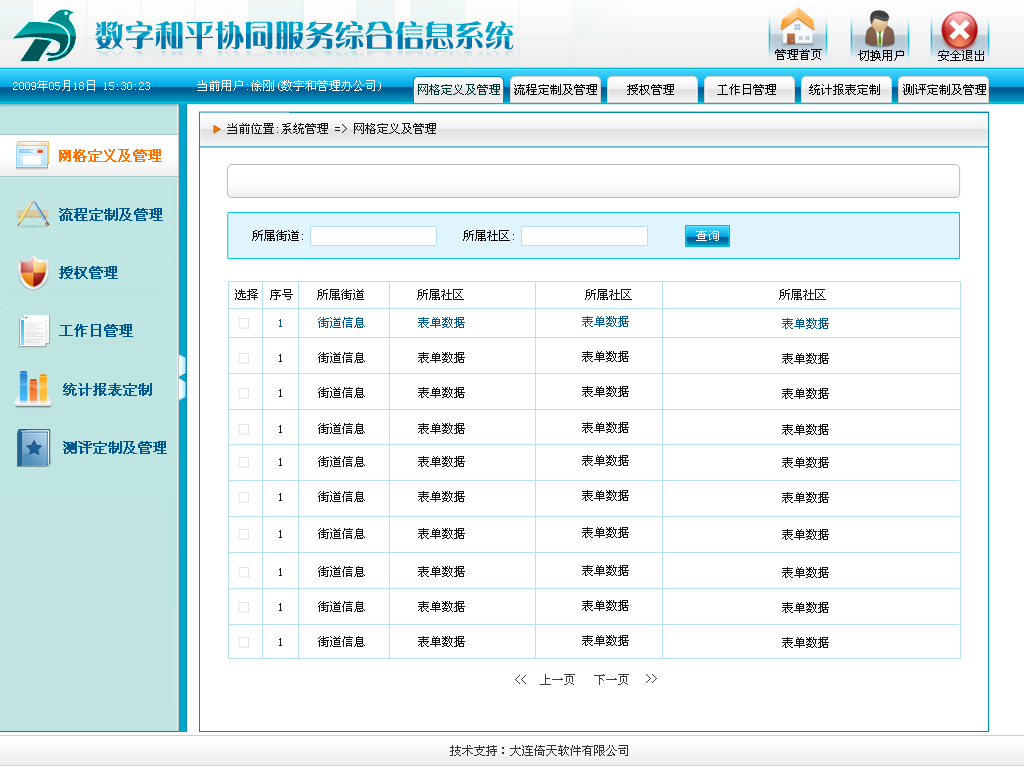
<style>
.page{position:relative;width:1024px;height:768px;background:#ffffff}
.page>*{position:absolute;margin:0}
.t1{font:12px "SimSun";color:#000000}
.t2{font:12px "SimSun";color:#ffffff}
.t3{font:12px "SimSun";color:#003333}
.t4{font:12px "SimSun";color:#141414}
.t5{font:14px "SimSun";color:#ff7400;font-weight:bold}
.t6{font:14px "SimSun";color:#005890;font-weight:bold}
.t7{font:12px "SimSun";color:#010101}
.t8{font:12px "SimSun";color:#3d3d3d}
.t9{font:12px "SimSun";color:#313232}
</style>
<div class="page">
<p class="t1" style="left:775px;top:49px;width:47px;height:11px">管理首页</p>
<p class="t1" style="left:858px;top:50px;width:46px;height:11px">切换用户</p>
<p class="t1" style="left:938px;top:50px;width:46px;height:11px">安全退出</p>
<p class="t2" style="left:13px;top:80px;width:137px;height:11px">2009年05月18日 15:30:23</p>
<p class="t2" style="left:197px;top:80px;width:184px;height:11px">当前用户:徐刚(数字和管理办公司)</p>
<p class="t3" style="left:418px;top:84px;width:82px;height:11px">网格定义及管理</p>
<p class="t1" style="left:514px;top:84px;width:83px;height:11px">流程定制及管理</p>
<p class="t1" style="left:627px;top:84px;width:47px;height:11px">授权管理</p>
<p class="t1" style="left:717px;top:84px;width:59px;height:11px">工作日管理</p>
<p class="t1" style="left:809px;top:84px;width:71px;height:11px">统计报表定制</p>
<p class="t1" style="left:903px;top:84px;width:83px;height:11px">测评定制及管理</p>
<p class="t4" style="left:227px;top:123px;width:209px;height:11px">当前位置:系统管理 =&gt; 网格定义及管理</p>
<p class="t5" style="left:59px;top:149px;width:103px;height:13px">网格定义及管理</p>
<p class="t6" style="left:59px;top:208px;width:104px;height:13px">流程定制及管理</p>
<p class="t7" style="left:252px;top:230px;width:51px;height:11px">所属街道:</p>
<p class="t7" style="left:463px;top:230px;width:51px;height:11px">所属社区:</p>
<p class="t2" style="left:696px;top:230px;width:23px;height:11px">查询</p>
<p class="t6" style="left:59px;top:266px;width:59px;height:13px">授权管理</p>
<p class="t6" style="left:59px;top:324px;width:74px;height:13px">工作日管理</p>
<p class="t6" style="left:63px;top:383px;width:89px;height:13px">统计报表定制</p>
<p class="t6" style="left:63px;top:441px;width:104px;height:13px">测评定制及管理</p>
<p class="t8" style="left:515px;top:675px;width:11px;height:9px">&lt;&lt;</p>
<p class="t8" style="left:540px;top:674px;width:35px;height:11px">上一页</p>
<p class="t8" style="left:594px;top:674px;width:35px;height:11px">下一页</p>
<p class="t8" style="left:646px;top:674px;width:11px;height:9px">&gt;&gt;</p>
<p class="t9" style="left:450px;top:745px;width:178px;height:11px">技术支持：大连倚天软件有限公司</p>
</div>
